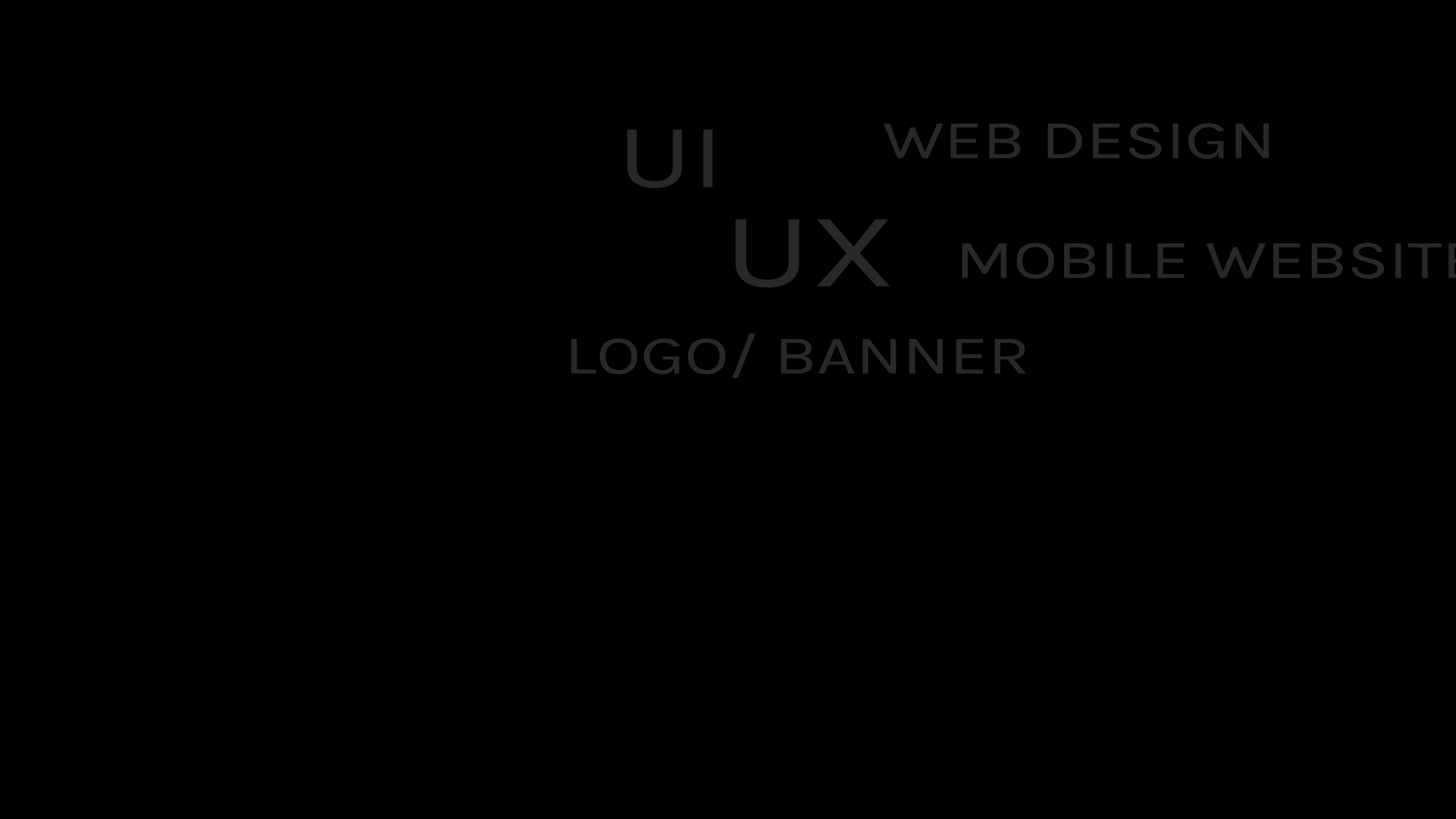
<style>
.page{position:relative;width:1456px;height:819px;background:#000000}
.page>*{position:absolute;margin:0}
.t1{font:54.6px "Karla-Regular";color:#282828;scale:1.25 1}
.t2{font:91px "Karla-Regular";color:#282828;scale:1.25 1}
.t3{font:106.2px "Karla-Regular";color:#282828;scale:1.25 1}
</style>
<div class="page">
<p class="t1" style="left:883px;top:123px;width:386px;height:36px">WEB DESIGN</p>
<p class="t2" style="left:627px;top:130px;width:86px;height:58px">UI</p>
<p class="t3" style="left:736px;top:219px;width:154px;height:69px">UX</p>
<p class="t1" style="left:571px;top:333px;width:455px;height:45px">LOGO/ BANNER</p>
</div>
